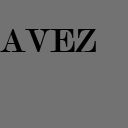
<style>
.page{position:relative;width:128px;height:128px;background:#727272}
.page>*{position:absolute;margin:0}
.t1{font:36.5px "Modern-Regular";color:#000000}
</style>
<div class="page">
<p class="t1" style="left:0px;top:29px;width:96px;height:23px">AVEZ</p>
</div>
